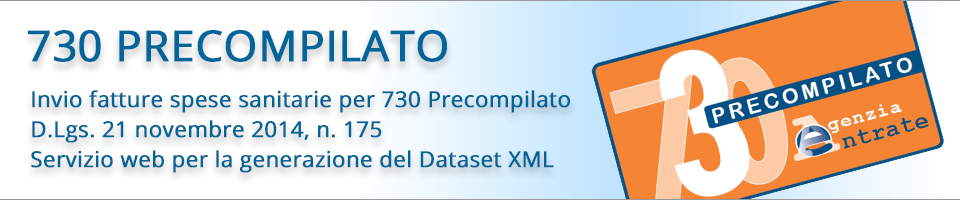
<style>
.page{position:relative;width:960px;height:200px;background:#ffffff}
.page>*{position:absolute;margin:0}
.t1{font:42.6px "OpenSans";color:#006699;font-weight:bold}
.t2{font:22px/30px "OpenSans";color:#006699;font-weight:bold}
</style>
<div class="page">
<p class="t1" style="left:28px;top:30px;width:419px;height:32px">730 PRECOMPILATO</p>
<p class="t2" style="left:31px;top:90px;width:539px;height:83px">Invio fatture spese sanitarie per 730 Precompilato<br>D.Lgs. 21 novembre 2014, n. 175<br>Servizio web per la generazione del Dataset XML</p>
</div>
